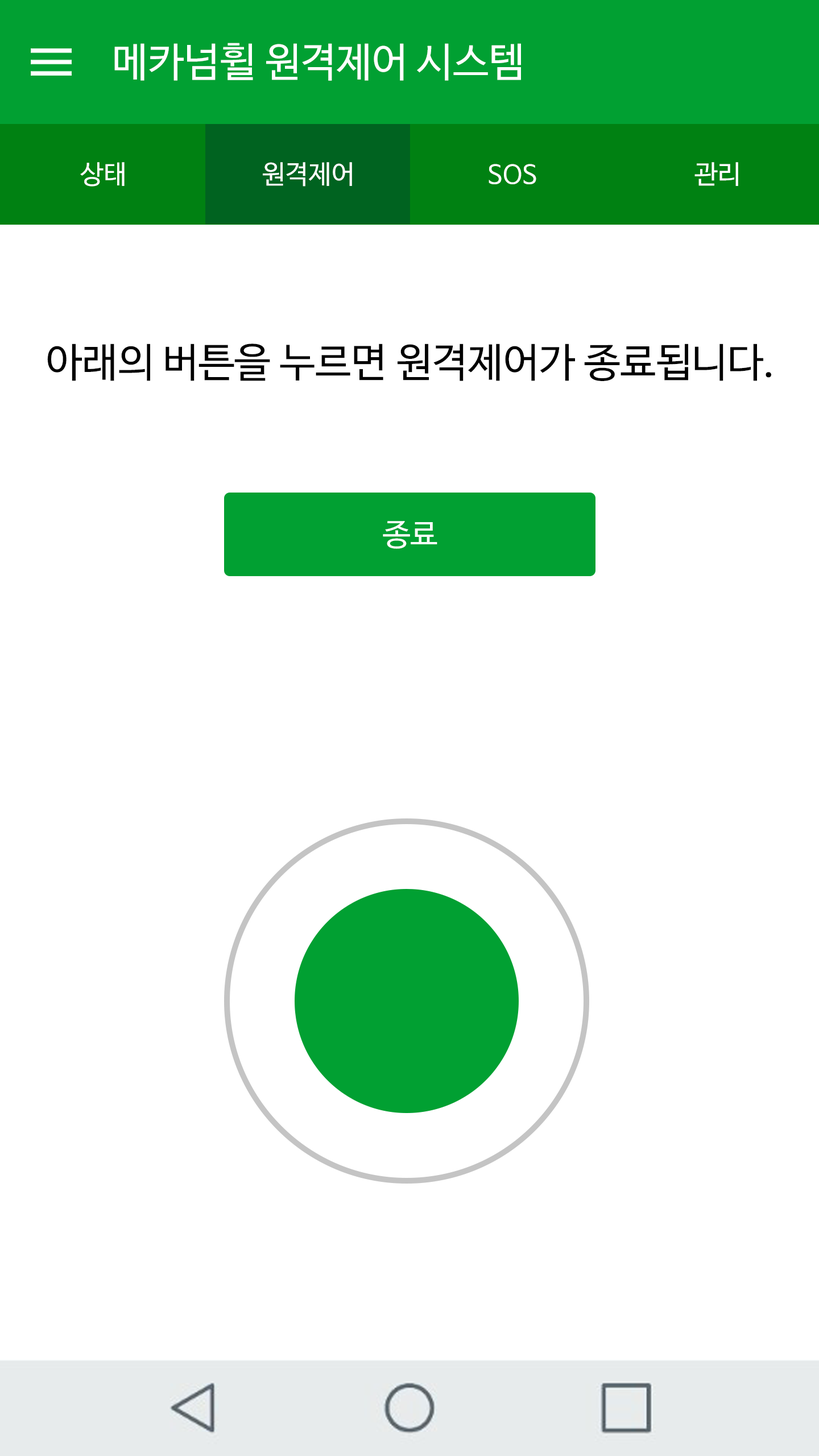
<style>
.page{position:relative;width:819px;height:1456px;background:#ffffff}
.page>*{position:absolute;margin:0}
.t1{font:40.3px "NanumBarunGothicOTF";color:#ffffff}
.t2{font:26.1px "NanumBarunGothicOTF";color:#ffffff}
.t3{font:40.3px "NanumBarunGothicOTF";color:#000000}
.t4{font:30.8px "NanumBarunGothicOTF";color:#ffffff}
</style>
<div class="page">
<p class="t1" style="left:114px;top:43px;width:407px;height:38px">메카넘휠 원격제어 시스템</p>
<p class="t2" style="left:80px;top:162px;width:45px;height:25px">상태</p>
<p class="t2" style="left:263px;top:162px;width:89px;height:25px">원격제어</p>
<p class="t2" style="left:489px;top:164px;width:47px;height:20px">SOS</p>
<p class="t2" style="left:694px;top:162px;width:44px;height:24px">관리</p>
<p class="t3" style="left:47px;top:344px;width:724px;height:37px">아래의 버튼을 누르면 원격제어가 종료됩니다.</p>
<p class="t4" style="left:383px;top:521px;width:54px;height:28px">종료</p>
</div>
